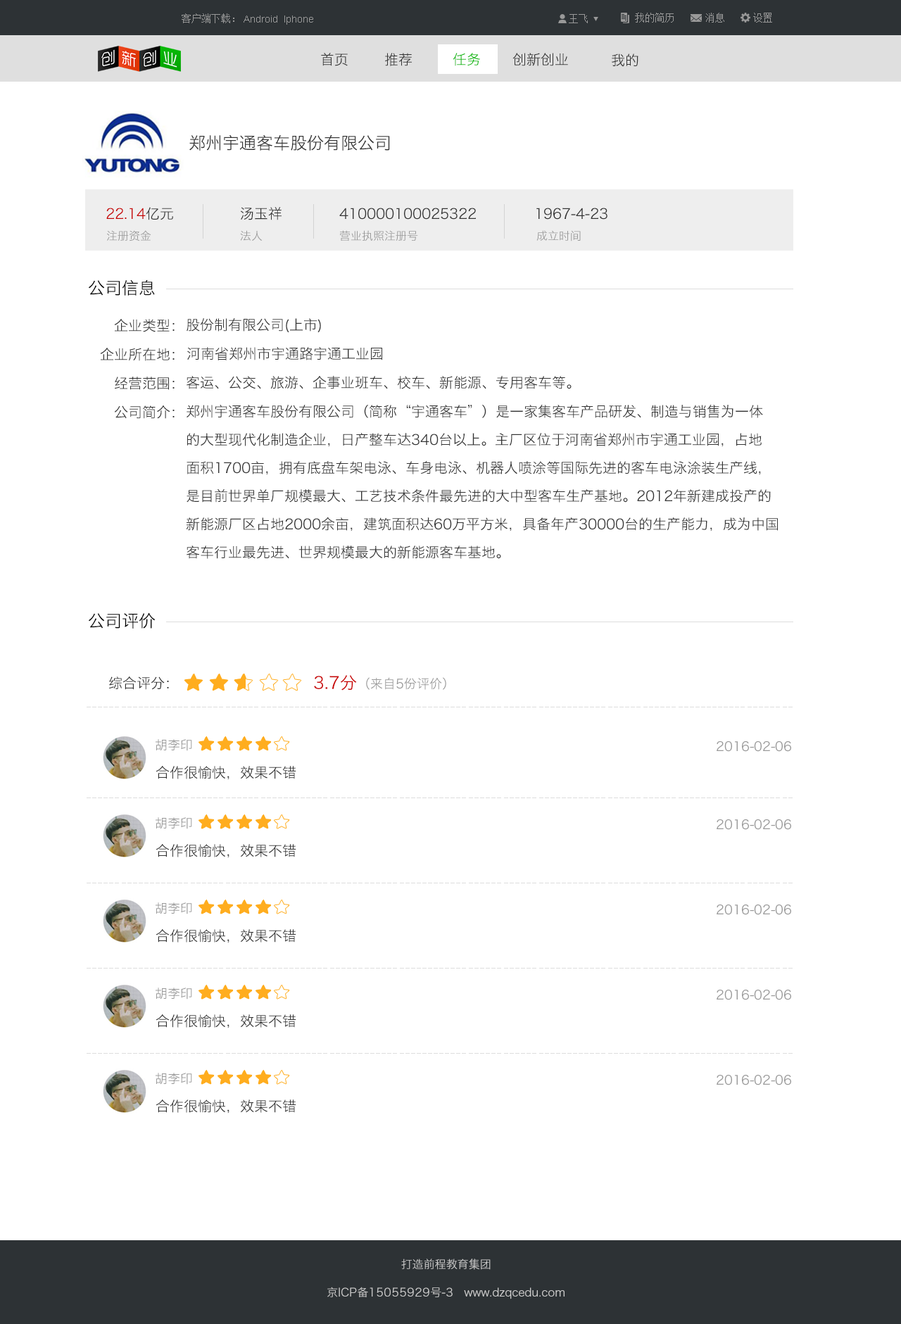
<style>
.page{position:relative;width:901px;height:1324px;background:#ffffff}
.page>*{position:absolute;margin:0}
.t1{font:9.9px "SimSun";color:#999999}
.t2{font:9.9px "ArialMT";color:#999999}
.t3{font:14.1px "HiraginoSansGB-W3";color:#333333}
.t4{font:14.1px "HiraginoSansGB-W3";color:#09ba08}
.t5{font:16.9px "HiraginoSansGB-W3";color:#333333}
.t6{font:14.1px "HiraginoSansGB-W3";color:#c70000}
.t7{font:11.3px "HiraginoSansGB-W3";color:#999999}
.t8{font:16.9px "HiraginoSansGB-W3";color:#000000}
.t9{font:14.1px/28.1px "HiraginoSansGB-W3";color:#333333}
.t10{font:16.9px "HiraginoSansGB-W3";color:#c90000}
.t11{font:12.7px "HiraginoSansGB-W3";color:#999999}
.t12{font:11.3px/28.1px "HiraginoSansGB-W3";color:#cccccc}
</style>
<div class="page">
<p class="t1" style="left:182px;top:13px;width:52px;height:10px">客户端下载：</p>
<p class="t2" style="left:243px;top:15px;width:70px;height:10px">Android  Iphone</p>
<p class="t1" style="left:569px;top:14px;width:19px;height:9px">王飞</p>
<p class="t1" style="left:635px;top:13px;width:38px;height:10px">我的简历</p>
<p class="t1" style="left:705px;top:13px;width:19px;height:10px">消息</p>
<p class="t1" style="left:753px;top:13px;width:19px;height:10px">设置</p>
<p class="t3" style="left:321px;top:53px;width:27px;height:13px">首页</p>
<p class="t3" style="left:385px;top:53px;width:27px;height:13px">推荐</p>
<p class="t4" style="left:453px;top:53px;width:27px;height:13px">任务</p>
<p class="t3" style="left:512px;top:53px;width:56px;height:13px">创新创业</p>
<p class="t3" style="left:612px;top:53px;width:26px;height:14px">我的</p>
<p class="t5" style="left:189px;top:134px;width:201px;height:17px">郑州宇通客车股份有限公司</p>
<p class="t6" style="left:106px;top:207px;width:67px;height:13px">22.14<span class="t3">亿元</span></p>
<p class="t3" style="left:240px;top:207px;width:41px;height:13px">汤玉祥</p>
<p class="t3" style="left:339px;top:208px;width:137px;height:12px">410000100025322</p>
<p class="t3" style="left:536px;top:208px;width:71px;height:12px">1967-4-23</p>
<p class="t7" style="left:107px;top:230px;width:44px;height:11px">注册资金</p>
<p class="t7" style="left:240px;top:230px;width:22px;height:11px">法人</p>
<p class="t7" style="left:340px;top:230px;width:78px;height:11px">营业执照注册号</p>
<p class="t7" style="left:536px;top:230px;width:45px;height:11px">成立时间</p>
<p class="t8" style="left:88px;top:279px;width:67px;height:17px">公司信息</p>
<p class="t3" style="left:114px;top:319px;width:61px;height:13px">企业类型：</p>
<p class="t3" style="left:186px;top:318px;width:135px;height:15px">股份制有限公司(上市)</p>
<p class="t3" style="left:100px;top:348px;width:75px;height:13px">企业所在地：</p>
<p class="t3" style="left:187px;top:346px;width:195px;height:14px">河南省郑州市宇通路宇通工业园</p>
<p class="t3" style="left:115px;top:377px;width:60px;height:13px">经营范围：</p>
<p class="t3" style="left:186px;top:375px;width:385px;height:14px">客运、公交、旅游、企事业班车、校车、新能源、专用客车等。</p>
<p class="t3" style="left:114px;top:405px;width:61px;height:14px">公司简介：</p>
<p class="t9" style="left:186px;top:405px;width:592px;height:154px">郑州宇通客车股份有限公司（简称“宇通客车”）是一家集客车产品研发、制造与销售为一体<br>的大型现代化制造企业，日产整车达340台以上。主厂区位于河南省郑州市宇通工业园，占地<br>面积1700亩，拥有底盘车架电泳、车身电泳、机器人喷涂等国际先进的客车电泳涂装生产线，<br>是目前世界单厂规模最大、工艺技术条件最先进的大中型客车生产基地。2012年新建成投产的<br>新能源厂区占地2000余亩，建筑面积达60万平方米，具备年产30000台的生产能力，成为中国<br>客车行业最先进、世界规模最大的新能源客车基地。</p>
<p class="t8" style="left:88px;top:612px;width:68px;height:16px">公司评价</p>
<p class="t3" style="left:109px;top:676px;width:60px;height:14px">综合评分：</p>
<p class="t10" style="left:314px;top:675px;width:43px;height:15px">3.7分</p>
<p class="t11" style="left:366px;top:677px;width:80px;height:13px">（来自5份评价）</p>
<p class="t11" style="left:156px;top:739px;width:36px;height:12px">胡李印</p>
<p class="t11" style="left:716px;top:741px;width:75px;height:11px">2016-02-06</p>
<p class="t3" style="left:156px;top:766px;width:140px;height:14px">合作很愉快，效果不错</p>
<p class="t11" style="left:156px;top:817px;width:36px;height:12px">胡李印</p>
<p class="t11" style="left:716px;top:819px;width:75px;height:11px">2016-02-06</p>
<p class="t3" style="left:156px;top:844px;width:140px;height:14px">合作很愉快，效果不错</p>
<p class="t11" style="left:156px;top:902px;width:36px;height:12px">胡李印</p>
<p class="t11" style="left:716px;top:904px;width:75px;height:11px">2016-02-06</p>
<p class="t3" style="left:156px;top:929px;width:140px;height:14px">合作很愉快，效果不错</p>
<p class="t11" style="left:156px;top:987px;width:36px;height:12px">胡李印</p>
<p class="t11" style="left:716px;top:989px;width:75px;height:11px">2016-02-06</p>
<p class="t3" style="left:156px;top:1014px;width:140px;height:14px">合作很愉快，效果不错</p>
<p class="t11" style="left:156px;top:1073px;width:36px;height:11px">胡李印</p>
<p class="t11" style="left:716px;top:1075px;width:75px;height:10px">2016-02-06</p>
<p class="t3" style="left:156px;top:1099px;width:140px;height:14px">合作很愉快，效果不错</p>
<p class="t12" style="left:327px;top:1258px;width:237px;height:41px;text-align:center">打造前程教育集团<br>京ICP备15055929号-3   www.dzqcedu.com</p>
</div>
